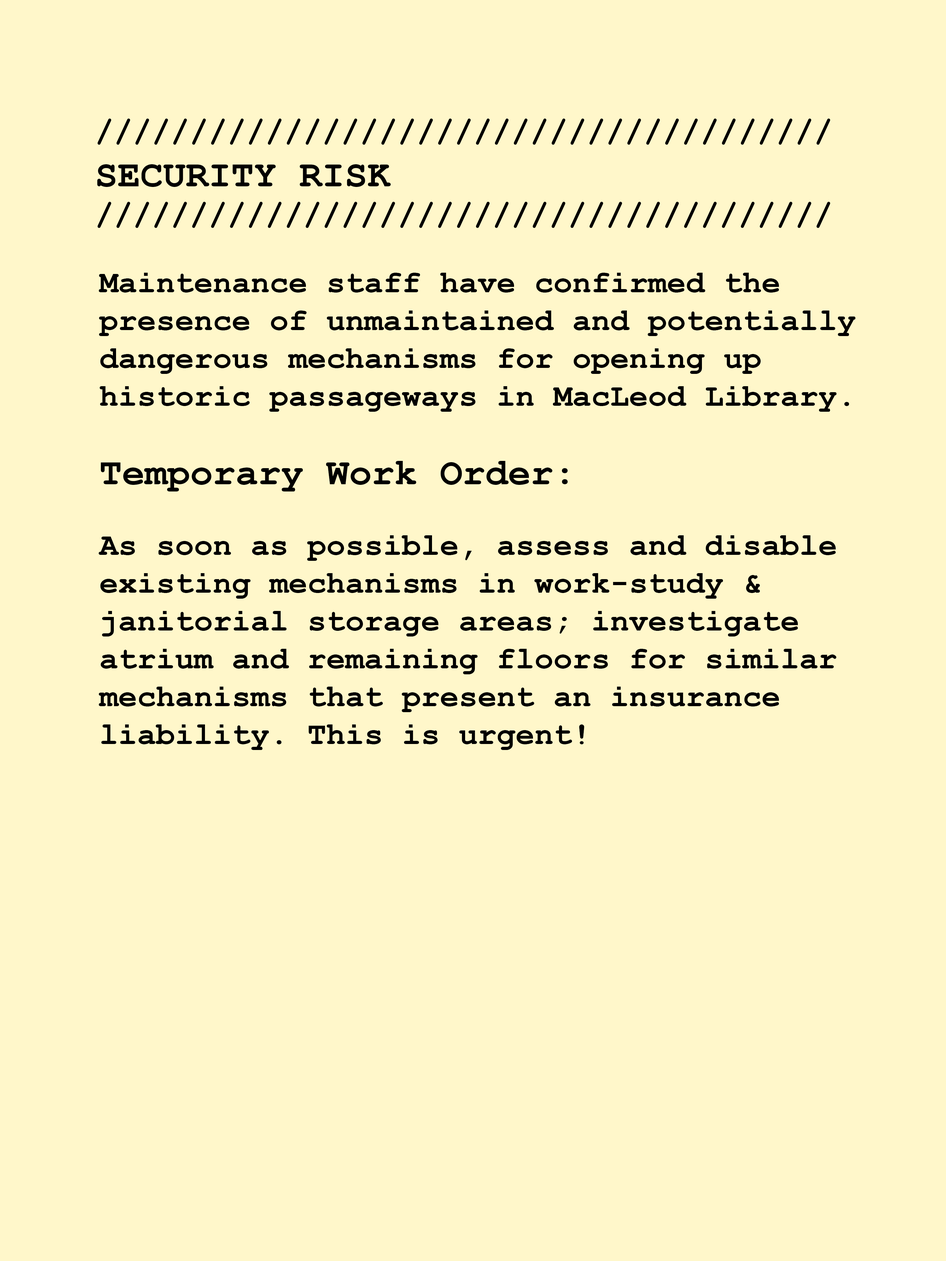
<style>
.page{position:relative;width:946px;height:1261px;background:#fff7ca}
.page>*{position:absolute;margin:0}
.t1{font:31.5px "CourierNewPS-BoldMT";color:#000000}
.t2{font:37.8px "CourierNewPS-BoldMT";color:#000000}
</style>
<div class="page">
<p class="t1" style="left:97px;top:119px;width:733px;height:109px">///////////////////////////////////////<br><span class="t2">SECURITY RISK<br></span>///////////////////////////////////////</p>
<p class="t1" style="left:99px;top:273px;width:756px;height:139px">Maintenance staff have confirmed the presence of unmaintained and potentially dangerous mechanisms for opening up historic passageways in MacLeod Library.</p>
<p class="t2" style="left:101px;top:461px;width:467px;height:30px">Temporary Work Order:</p>
<p class="t1" style="left:99px;top:535px;width:737px;height:215px">As soon as possible, assess and disable existing mechanisms in work-study &amp; janitorial storage areas; investigate atrium and remaining floors for similar mechanisms that present an insurance liability. This is urgent!</p>
</div>
